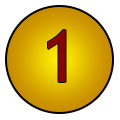
<style>
.page{position:relative;width:120px;height:120px;background:#ffffff}
.page>*{position:absolute;margin:0}
.t1{font:72px "TrebuchetMS";color:#870707}
</style>
<div class="page">
<p class="t1" style="left:48px;top:30px;width:18px;height:52px">1</p>
</div>
